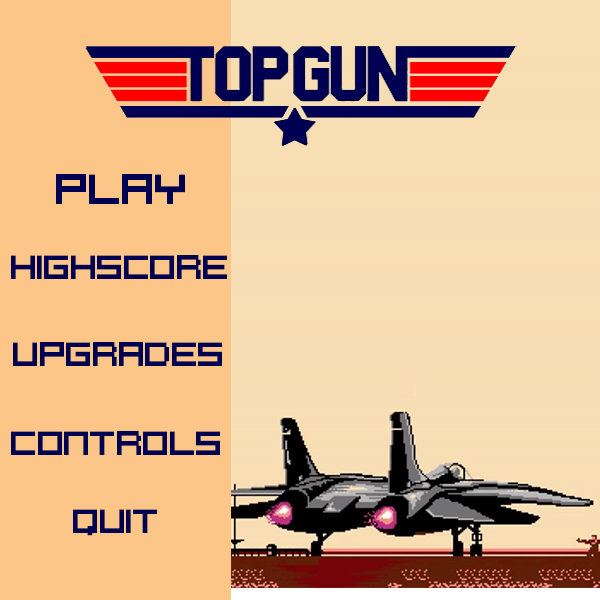
<style>
.page{position:relative;width:600px;height:600px;background:#fdc689}
.page>*{position:absolute;margin:0}
.t1{font:29.5px "PixelCaps!";color:#000052}
.t2{font:23.6px "PixelCaps!";color:#000052}
</style>
<div class="page">
<p class="t1" style="left:56px;top:174px;width:129px;height:30px">Play</p>
<p class="t2" style="left:11px;top:255px;width:216px;height:24px">Highscore</p>
<p class="t2" style="left:13px;top:342px;width:209px;height:24px">Upgrades</p>
<p class="t2" style="left:11px;top:431px;width:209px;height:24px">Controls</p>
<p class="t2" style="left:73px;top:509px;width:84px;height:27px">Quit</p>
</div>
